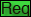
<style>
.page{position:relative;width:31px;height:17px}
.page>*{position:absolute;margin:0}
.t1{font:16px "Helvetica";color:#171107}
</style>
<div class="page">
<p class="t1" style="left:2px;top:2px;width:28px;height:15px">Req</p>
</div>
